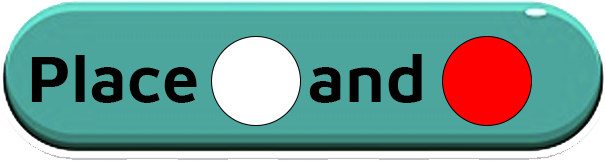
<style>
.page{position:relative;width:605px;height:161px;background:#4da69d}
.page>*{position:absolute;margin:0}
.t1{font:66.7px "XXIIAven-Bold";color:#000000}
</style>
<div class="page">
<p class="t1" style="left:31px;top:54px;width:391px;height:49px">Place      and</p>
</div>
